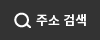
<style>
.page{position:relative;width:100px;height:40px;background:#333333}
.page>*{position:absolute;margin:0}
.t1{font:13px "NotoSansKR-Bold";color:#ffffff}
</style>
<div class="page">
<p class="t1" style="left:36px;top:14px;width:50px;height:12px">주소 검색</p>
</div>
